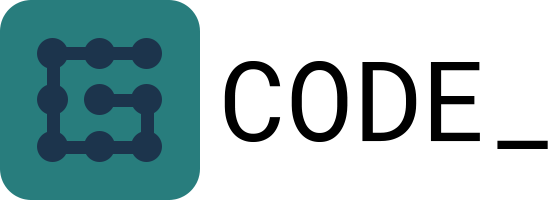
<style>
.page{position:relative;width:556px;height:200px;background:#ffffff}
.page>*{position:absolute;margin:0}
.t1{font:112.5px "RobotoMono-Regular";color:#000000}
</style>
<div class="page">
<p class="t1" style="left:224px;top:61px;width:324px;height:88px">CODE_</p>
</div>
